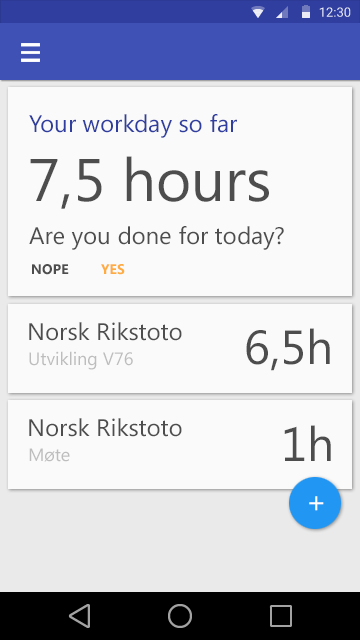
<style>
.page{position:relative;width:360px;height:640px;background:#fafafa}
.page>*{position:absolute;margin:0}
.t1{font:24px "SegoeUI";color:#303f9f}
.t2{font:60px "SegoeUI";color:#4d4d4d}
.t3{font:24px "SegoeUI";color:#4d4d4d}
.t4{font:14px "SegoeUI-Bold";color:#4d4d4d;text-transform:uppercase}
.t5{font:14px "SegoeUI-Bold";color:#ffab40;text-transform:uppercase}
.t6{font:48px "SegoeUI";color:#4d4d4d}
.t7{font:18px "SegoeUI";color:#bdbdbd}
.t8{font:30px "SegoeUI";color:#ffffff}
</style>
<div class="page">
<p class="t1" style="left:29px;top:114px;width:208px;height:24px">Your workday so far</p>
<p class="t2" style="left:30px;top:156px;width:239px;height:53px">7,5 hours</p>
<p class="t3" style="left:29px;top:226px;width:255px;height:24px">Are you done for today?</p>
<p class="t4" style="left:32px;top:264px;width:37px;height:11px">nope</p>
<p class="t5" style="left:101px;top:264px;width:24px;height:11px">yes</p>
<p class="t3" style="left:29px;top:322px;width:153px;height:19px">Norsk Rikstoto</p>
<p class="t6" style="left:246px;top:328px;width:84px;height:43px">6,5h</p>
<p class="t7" style="left:29px;top:351px;width:104px;height:19px">Utvikling V76</p>
<p class="t3" style="left:29px;top:418px;width:153px;height:19px">Norsk Rikstoto</p>
<p class="t6" style="left:284px;top:425px;width:47px;height:36px">1h</p>
<p class="t7" style="left:29px;top:448px;width:41px;height:14px">Møte</p>
<p class="t8" style="left:309px;top:496px;width:15px;height:15px">+</p>
</div>
